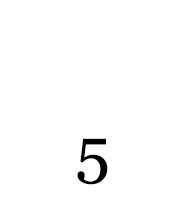
<style>
.page{position:relative;width:188px;height:202px;background:#ffffff}
.page>*{position:absolute;margin:0}
.t1{font:64.7px "Georgia";color:#000000}
</style>
<div class="page">
<p class="t1" style="left:77px;top:138px;width:31px;height:47px">5</p>
</div>
